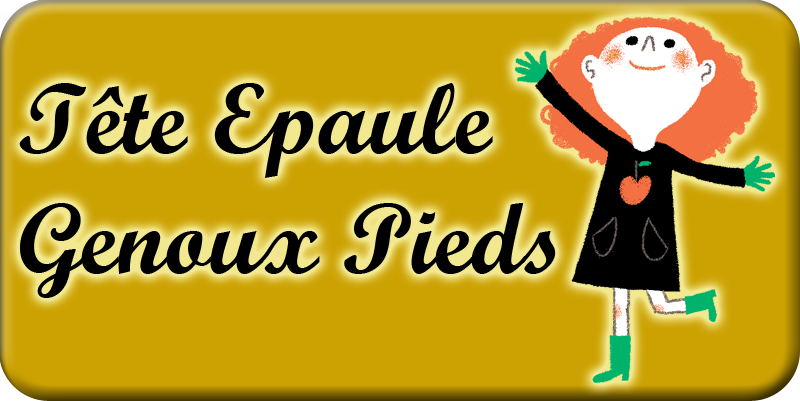
<style>
.page{position:relative;width:800px;height:401px;background:#cca203}
.page>*{position:absolute;margin:0}
.t1{font:100px "ScriptMTBold";color:#000000}
</style>
<div class="page">
<p class="t1" style="left:19px;top:83px;width:537px;height:215px">Tête Epaule Genoux Pieds</p>
</div>
